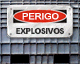
<style>
.page{position:relative;width:80px;height:64px}
.page>*{position:absolute;margin:0}
.t1{font:8.5px "ArialMT";letter-spacing:0.005em;color:#ffffff;scale:1.11 1}
.t2{font:8.3px "Arial-Black";letter-spacing:-0.05em;color:#2f2d2e;scale:0.93 1}
.t3{font:8.3px "Arial-Black";letter-spacing:-0.05em;color:#2f2d2e;scale:0.76 1}
.t4{font:8.3px "Arial-Black";letter-spacing:-0.05em;color:#2f2d2e}
</style>
<div class="page">
<p class="t1" style="left:22px;top:13px;width:37px;height:7px">PERIGO</p>
<p class="t2" style="left:16px;top:28px;width:48px;height:6px"><span class="t3">E</span>XP<span class="t3">L</span><span class="t4">O</span><span class="t3">SI</span>V<span class="t4">O</span><span class="t3">S</span></p>
</div>
